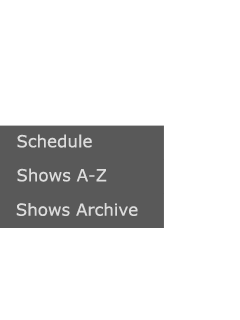
<style>
.page{position:relative;width:240px;height:320px;background:#ffffff}
.page>*{position:absolute;margin:0}
.t1{font:16.7px "Verdana";color:#dcdcdc}
</style>
<div class="page">
<p class="t1" style="left:17px;top:134px;width:75px;height:14px">Schedule</p>
<p class="t1" style="left:17px;top:168px;width:90px;height:14px">Shows A-Z</p>
<p class="t1" style="left:16px;top:203px;width:122px;height:13px">Shows Archive</p>
</div>
